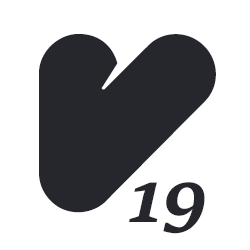
<style>
.page{position:relative;width:250px;height:250px;background:#ffffff}
.page>*{position:absolute;margin:0}
.t1{font:250px "VAL";letter-spacing:0.06em;color:#25272d}
.t2{font:70px "SitkaSmall-BoldItalic";color:#25272d}
</style>
<div class="page">
<p class="t1" style="left:39px;top:34px;width:177px;height:179px">V</p>
<p class="t2" style="left:129px;top:182px;width:76px;height:52px">19</p>
</div>
